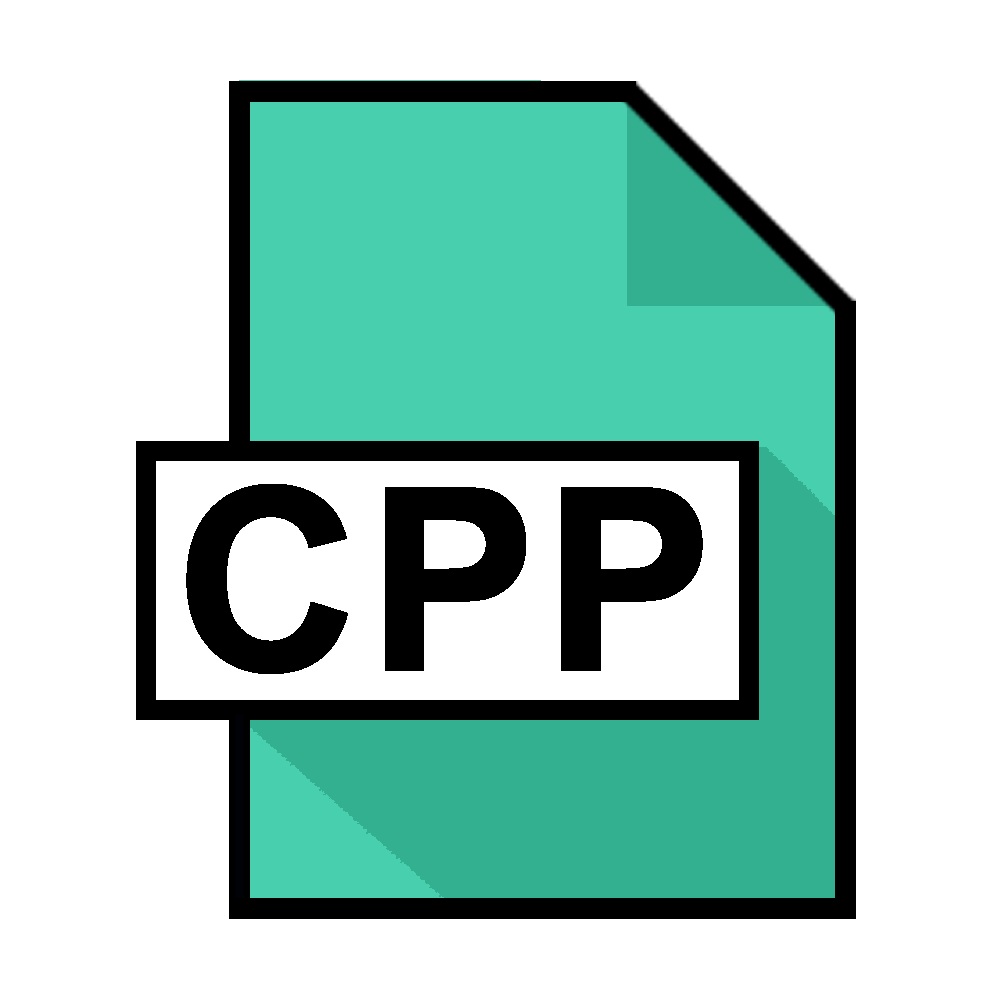
<style>
.page{position:relative;width:1000px;height:1000px;background:#ffffff}
.page>*{position:absolute;margin:0}
.t1{font:253.9px "Arial-BoldMT";color:#000000;font-weight:bold}
</style>
<div class="page">
<p class="t1" style="left:186px;top:484px;width:517px;height:190px">CPP</p>
</div>
